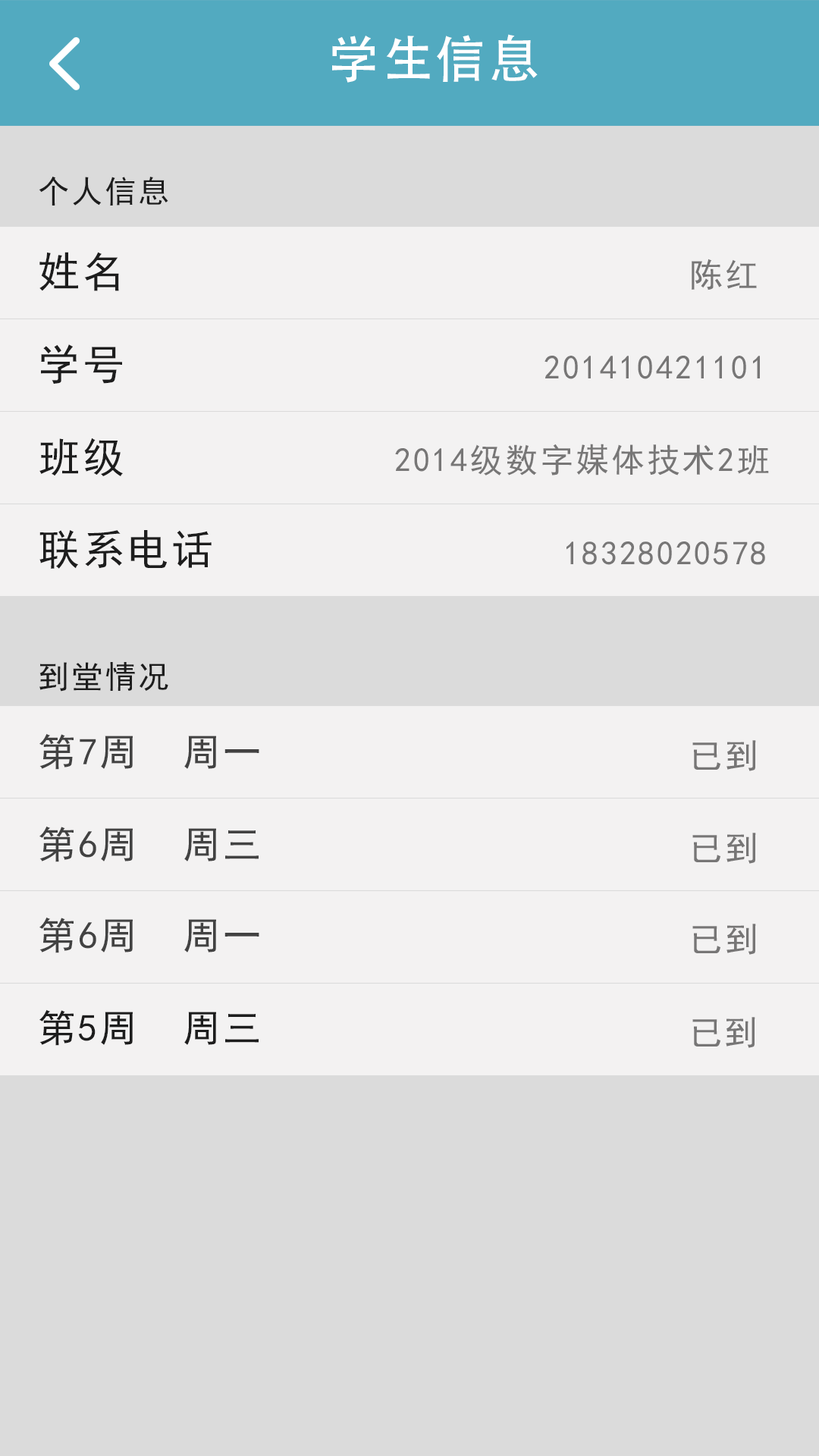
<style>
.page{position:relative;width:819px;height:1456px;background:#f3f2f2}
.page>*{position:absolute;margin:0}
.t1{font:50.8px "AdobeHeitiStd-Regular";letter-spacing:0.06em;color:#ffffff}
.t2{font:31.5px "SimHei";letter-spacing:0.06em;color:#1d1d1d}
.t3{font:41.8px "SimHei";letter-spacing:0.06em;color:#1d1d1d}
.t4{font:33.5px "SimHei";letter-spacing:0.06em;color:#777676}
.t5{font:37.9px "SimHei";letter-spacing:0.06em;color:#424242}
.t6{font:37.9px "SimHei";letter-spacing:0.06em;color:#1d1d1d}
</style>
<div class="page">
<p class="t1" style="left:332px;top:34px;width:206px;height:49px">学生信息</p>
<p class="t2" style="left:39px;top:176px;width:129px;height:30px">个人信息</p>
<p class="t3" style="left:39px;top:252px;width:80px;height:39px">姓名</p>
<p class="t4" style="left:692px;top:259px;width:65px;height:31px">陈红</p>
<p class="t3" style="left:41px;top:344px;width:81px;height:40px">学号</p>
<p class="t4" style="left:544px;top:356px;width:216px;height:23px">201410421101</p>
<p class="t3" style="left:39px;top:438px;width:84px;height:38px">班级</p>
<p class="t4" style="left:395px;top:444px;width:374px;height:31px">2014级数字媒体技术2班</p>
<p class="t3" style="left:39px;top:530px;width:173px;height:39px">联系电话</p>
<p class="t4" style="left:566px;top:541px;width:199px;height:24px">18328020578</p>
<p class="t2" style="left:39px;top:662px;width:129px;height:30px">到堂情况</p>
<p class="t5" style="left:39px;top:733px;width:220px;height:37px">第7周  周一</p>
<p class="t4" style="left:692px;top:740px;width:64px;height:31px">已到</p>
<p class="t5" style="left:39px;top:826px;width:220px;height:36px">第6周  周三</p>
<p class="t4" style="left:692px;top:833px;width:64px;height:31px">已到</p>
<p class="t5" style="left:39px;top:917px;width:220px;height:36px">第6周  周一</p>
<p class="t4" style="left:692px;top:924px;width:64px;height:31px">已到</p>
<p class="t6" style="left:39px;top:1009px;width:220px;height:37px">第5周  周三</p>
<p class="t4" style="left:692px;top:1017px;width:63px;height:31px">已到</p>
</div>
